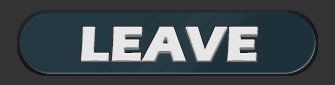
<style>
.page{position:relative;width:335px;height:85px;background:#333333}
.page>*{position:absolute;margin:0}
.t1{font:50.1px "ErasITC-Bold";color:#e6e6e6;font-weight:bold}
</style>
<div class="page">
<p class="t1" style="left:81px;top:26px;width:177px;height:36px">LEAVE</p>
</div>
